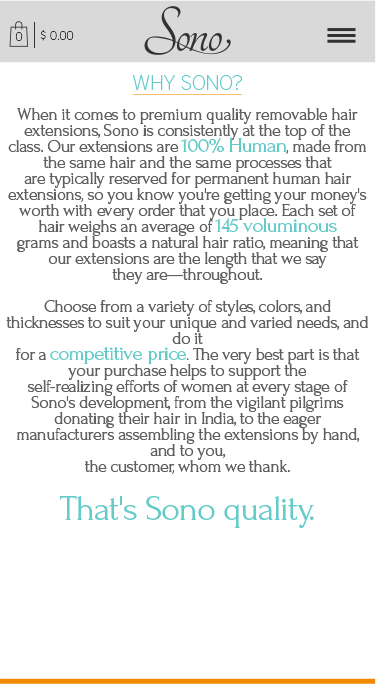
<style>
.page{position:relative;width:376px;height:691px;background:#ffffff}
.page>*{position:absolute;margin:0}
.t1{font:12.4px "DistrictPro-Thin";color:#323232}
.t2{font:21px "DistrictPro-Thin";color:#65cbc9}
.t3{font:18px/16px "Forum";letter-spacing:-0.031em;color:#5f6062}
.t4{font:21px/16px "Forum";letter-spacing:-0.031em;color:#65cbc9}
.t5{font:14px/16px "Forum";letter-spacing:-0.031em;color:#5f6062}
.t6{font:36px/16px "Forum";letter-spacing:-0.031em;color:#65cbc9}
</style>
<div class="page">
<p class="t1" style="left:40px;top:29px;width:34px;height:12px">$ 0.00</p>
<p class="t1" style="left:15px;top:32px;width:8px;height:9px">0</p>
<p class="t2" style="left:133px;top:75px;width:109px;height:15px">WHY SONO?</p>
<p class="t3" style="left:6px;top:108px;width:362px;height:420px;text-align:center">When it comes to premium quality removable hair extensions, Sono is consistently at the top of the<br>class. Our extensions are <span class="t4">100% Human</span>, made from the same hair and the same processes that<br>are typically reserved for permanent human hair extensions, so you know you're getting your money's<br>worth with every order that you place. Each set of hair weighs an average of <span class="t4">145 voluminous<br></span>grams and boasts a natural hair ratio, meaning that our extensions are the length that we say<br>they are—throughout.<br><br>Choose from a variety of styles, colors, and thicknesses to suit your unique and varied needs, and do it<br>for a <span class="t4">competitive price</span><span class="t5">.</span> The very best part is that your purchase helps to support the<br>self-realizing efforts of women at every stage of Sono's development, from the vigilant pilgrims<br>donating their hair in India, to the eager manufacturers assembling the extensions by hand, and to you,<br>the customer, whom we thank.<br><br><br><span class="t6">That's Sono quality.</span></p>
</div>
